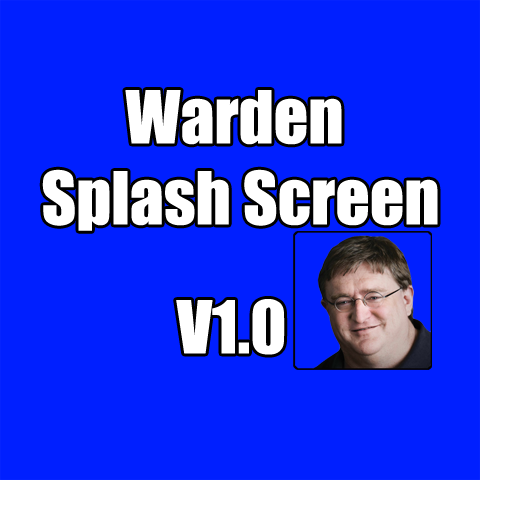
<style>
.page{position:relative;width:512px;height:512px;background:#001fff}
.page>*{position:absolute;margin:0}
.t1{font:67.5px "Impact";color:#ffffff}
</style>
<div class="page">
<p class="t1" style="left:42px;top:90px;width:396px;height:141px;text-align:center">Warden <br>Splash Screen</p>
<p class="t1" style="left:176px;top:299px;width:109px;height:56px">V1.0</p>
</div>
